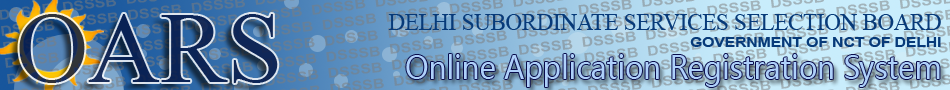
<style>
.page{position:relative;width:950px;height:90px}
.page>*{position:absolute;margin:0}
.t1{font:100px "TimesNewRomanPSMT";color:#041544}
.t2{font:24.4px/16.7px "TimesNewRomanPSMT";color:#073a79;scale:0.92 1}
.t3{font:14.1px/16.7px "Arial-BoldMT";color:#073a79;scale:1.11 1}
.t4{font:31.2px "MicrosoftYaHei";color:#aed0fa;scale:0.92 1}
</style>
<div class="page">
<p class="t1" style="left:19px;top:14px;width:259px;height:69px;opacity:0.82">OARS</p>
<p class="t2" style="left:388px;top:14px;width:553px;height:33px;text-align:right">DELHI SUBORDINATE SERVICES SELECTION BOARD<br><span class="t3">GOVERNMENT OF NCT OF DELHI</span></p>
<p class="t4" style="left:406px;top:54px;width:534px;height:33px">Online Application Registration System</p>
</div>
